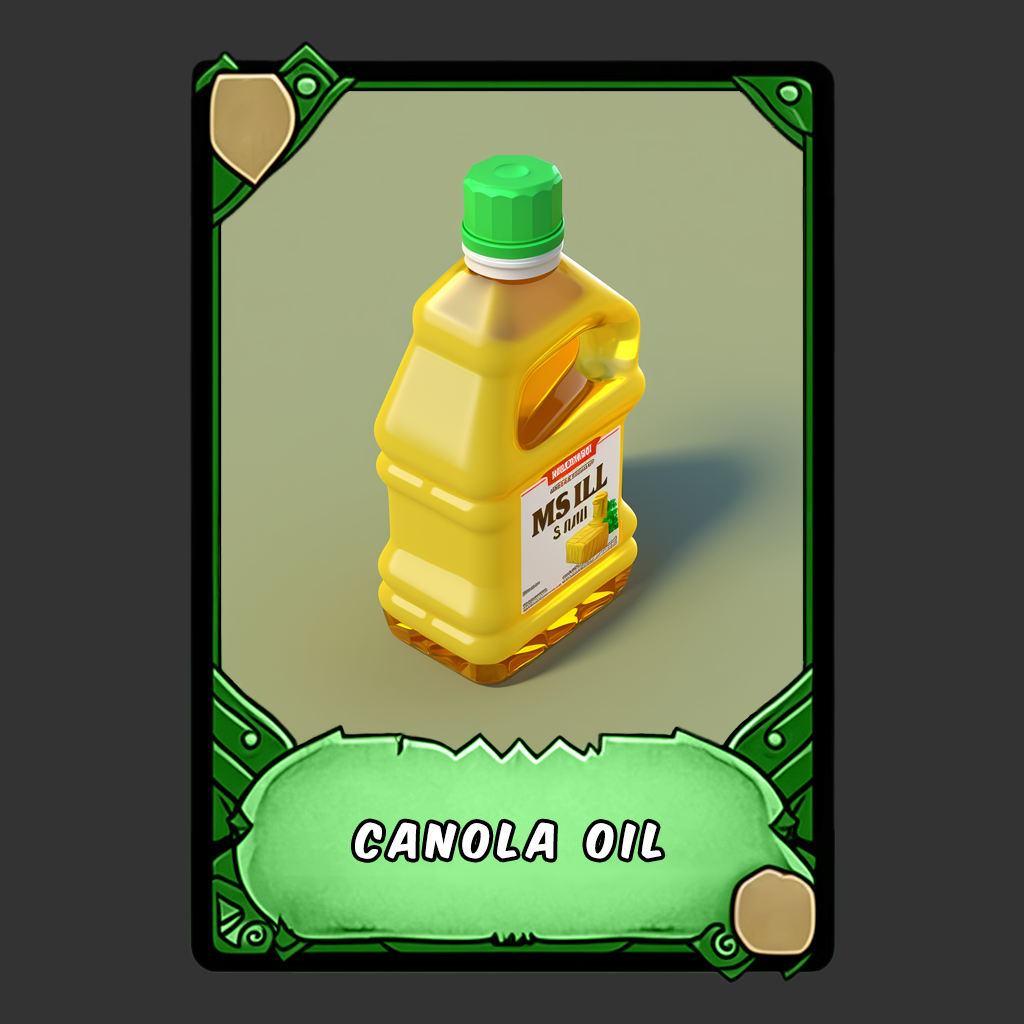
<style>
.page{position:relative;width:1024px;height:1024px;background:#333333}
.page>*{position:absolute;margin:0}
.t1{font:40px "KomikaAxis";letter-spacing:0.2em;color:#ffffff}
</style>
<div class="page">
<p class="t1" style="left:355px;top:822px;width:307px;height:37px">Canola oil</p>
</div>
